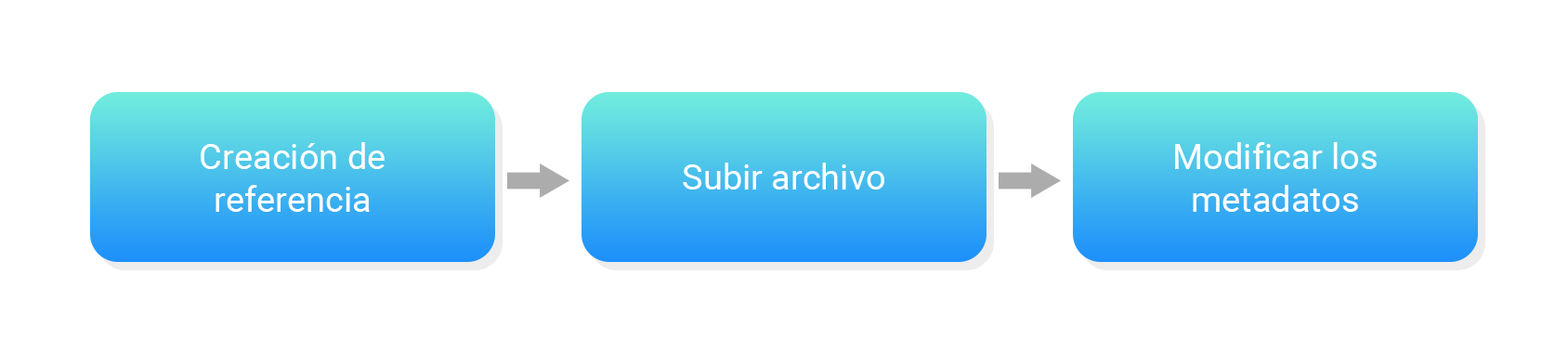
<style>
.page{position:relative;width:1568px;height:353px;background:#ffffff}
.page>*{position:absolute;margin:0}
.t1{font:35.3px "Roboto-Regular";color:#ffffff}
</style>
<div class="page">
<p class="t1" style="left:201px;top:142px;width:184px;height:70px;text-align:center">Creación de<br>referencia</p>
<p class="t1" style="left:1175px;top:142px;width:202px;height:70px;text-align:center">Modificar los<br>metadatos</p>
<p class="t1" style="left:683px;top:163px;width:201px;height:26px">Subir archivo</p>
</div>
